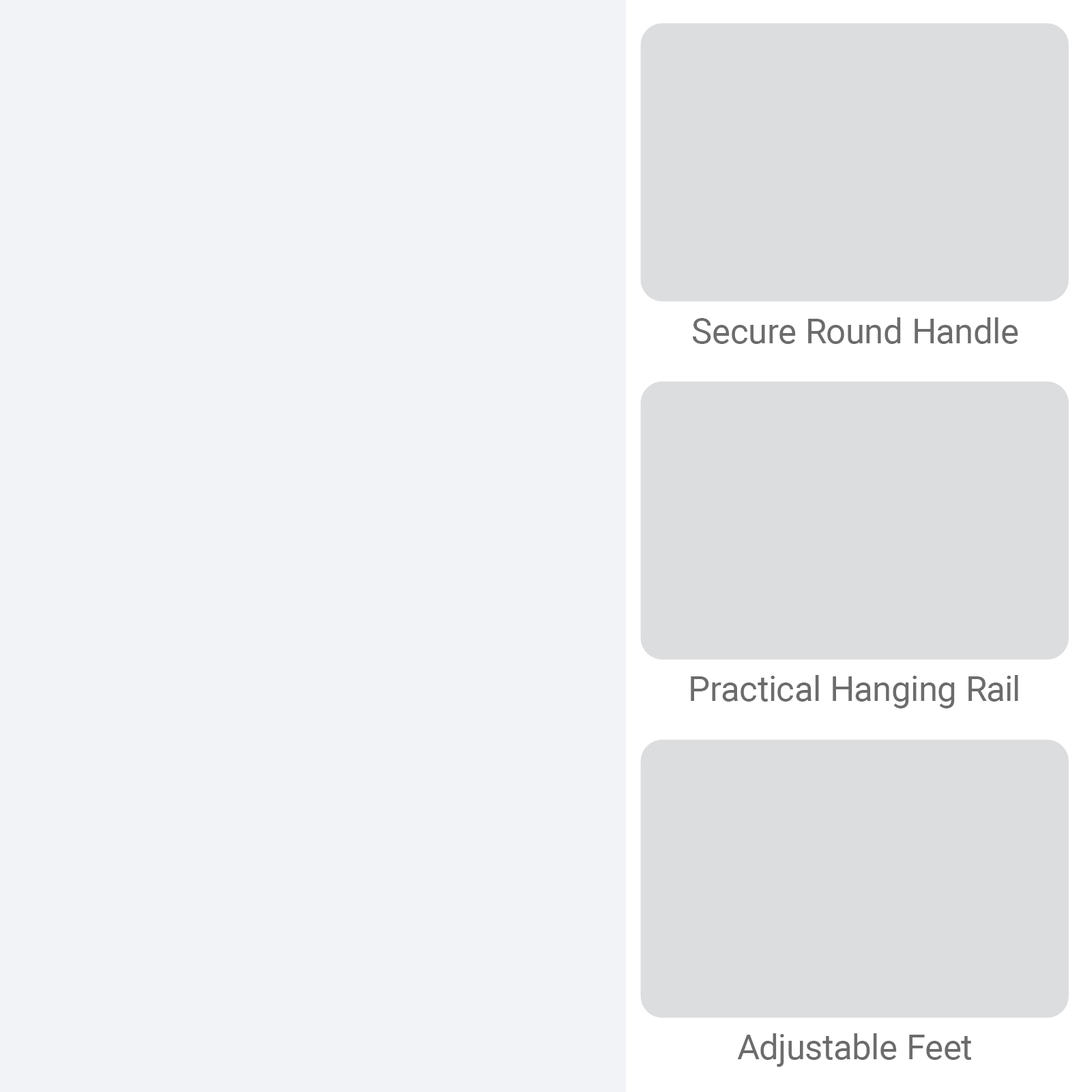
<style>
.page{position:relative;width:1092px;height:1092px;background:#f2f3f6}
.page>*{position:absolute;margin:0}
.t1{font:34.9px "Roboto-Regular";color:#6c6c6c}
</style>
<div class="page">
<p class="t1" style="left:693px;top:317px;width:325px;height:27px">Secure Round Handle</p>
<p class="t1" style="left:691px;top:675px;width:327px;height:33px">Practical Hanging Rail</p>
<p class="t1" style="left:737px;top:1033px;width:234px;height:34px">Adjustable Feet</p>
</div>
